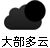
<style>
.page{position:relative;width:50px;height:48px;background:#ffffff}
.page>*{position:absolute;margin:0}
.t1{font:12px "OPPOSans-R";color:#000000}
</style>
<div class="page">
<p class="t1" style="left:2px;top:36px;width:46px;height:11px">大部多云</p>
</div>
